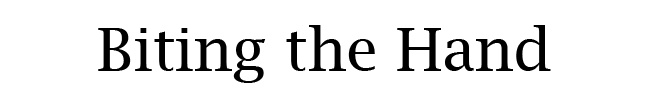
<style>
.page{position:relative;width:646px;height:100px;background:#ffffff}
.page>*{position:absolute;margin:0}
.t1{font:60px "LucidaBright";color:#000000}
</style>
<div class="page">
<p class="t1" style="left:98px;top:25px;width:453px;height:58px">Biting the Hand</p>
</div>
